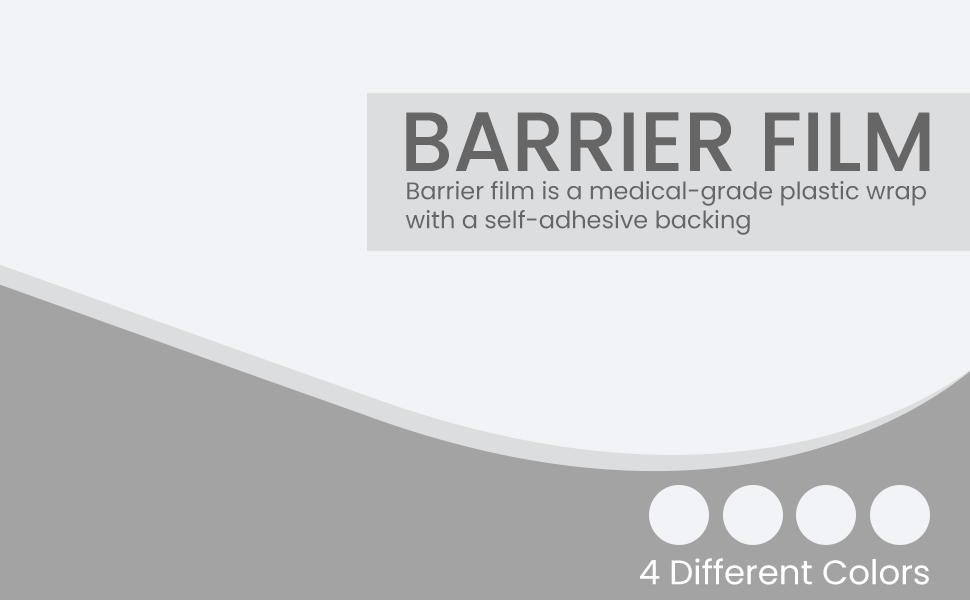
<style>
.page{position:relative;width:970px;height:600px;background:#f2f3f6}
.page>*{position:absolute;margin:0}
.t1{font:84px "Poppins-Medium";color:#666666;text-transform:uppercase}
.t2{font:24px "Poppins-Regular";color:#666666}
.t3{font:34px "Poppins-Regular";color:#ffffff}
</style>
<div class="page">
<p class="t1" style="left:406px;top:112px;width:524px;height:59px">BARRIER FILM</p>
<p class="t2" style="left:405px;top:181px;width:521px;height:54px">Barrier film is a medical-grade plastic wrap<br>with a self-adhesive backing</p>
<p class="t3" style="left:640px;top:558px;width:289px;height:27px">4 Different Colors</p>
</div>
